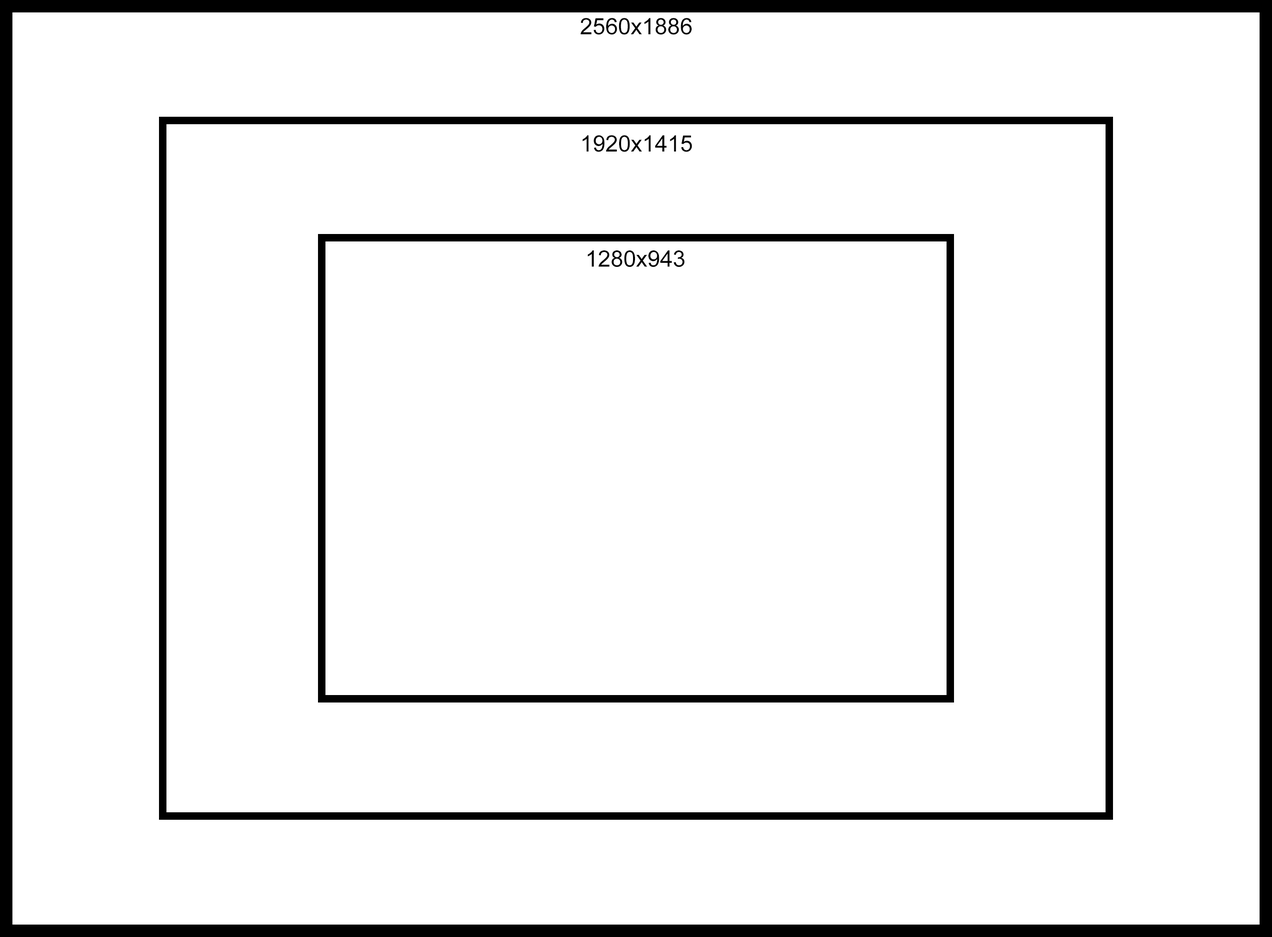
<style>
.page{position:relative;width:1272px;height:937px;background:#ffffff}
.page>*{position:absolute;margin:0}
.t1{font:22.8px "ArialMT";color:#000000}
</style>
<div class="page">
<p class="t1" style="left:580px;top:18px;width:112px;height:17px">2560x1886</p>
<p class="t1" style="left:582px;top:135px;width:110px;height:17px">1920x1415</p>
<p class="t1" style="left:588px;top:250px;width:97px;height:17px">1280x943</p>
</div>
